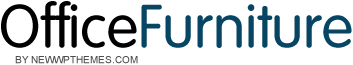
<style>
.page{position:relative;width:353px;height:65px;background:#ffffff}
.page>*{position:absolute;margin:0}
.t1{font:60px "VoguePlain";color:#064563}
.t2{font:60px "VoguePlain";color:#000000}
.t3{font:10px "ArialMT";color:#4e4d4d;text-transform:uppercase}
</style>
<div class="page">
<p class="t1" style="left:1px;top:1px;width:351px;height:47px"><span class="t2">Office</span>Furniture</p>
<p class="t3" style="left:15px;top:56px;width:123px;height:8px">by NewWpThemes.com</p>
</div>
